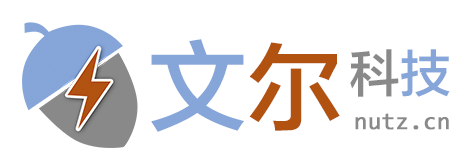
<style>
.page{position:relative;width:472px;height:167px;background:#ffffff}
.page>*{position:absolute;margin:0}
.t1{font:99.2px "FZLTZHK--GBK1-0";color:#86a5d9}
.t2{font:95.2px "FZLTZHK--GBK1-0";color:#b15210}
.t3{font:50.8px "FZLTZHK--GBK1-0";color:#898989}
.t4{font:50.8px "FZLTZHK--GBK1-0";color:#86a5d9}
.t5{font:24px "Consolas";color:#898989;font-weight:bold}
</style>
<div class="page">
<p class="t1" style="left:151px;top:39px;width:189px;height:93px">文<span class="t2">尔</span></p>
<p class="t3" style="left:350px;top:49px;width:100px;height:48px">科<span class="t4">技</span></p>
<p class="t5" style="left:355px;top:113px;width:94px;height:17px">nutz.cn</p>
</div>
